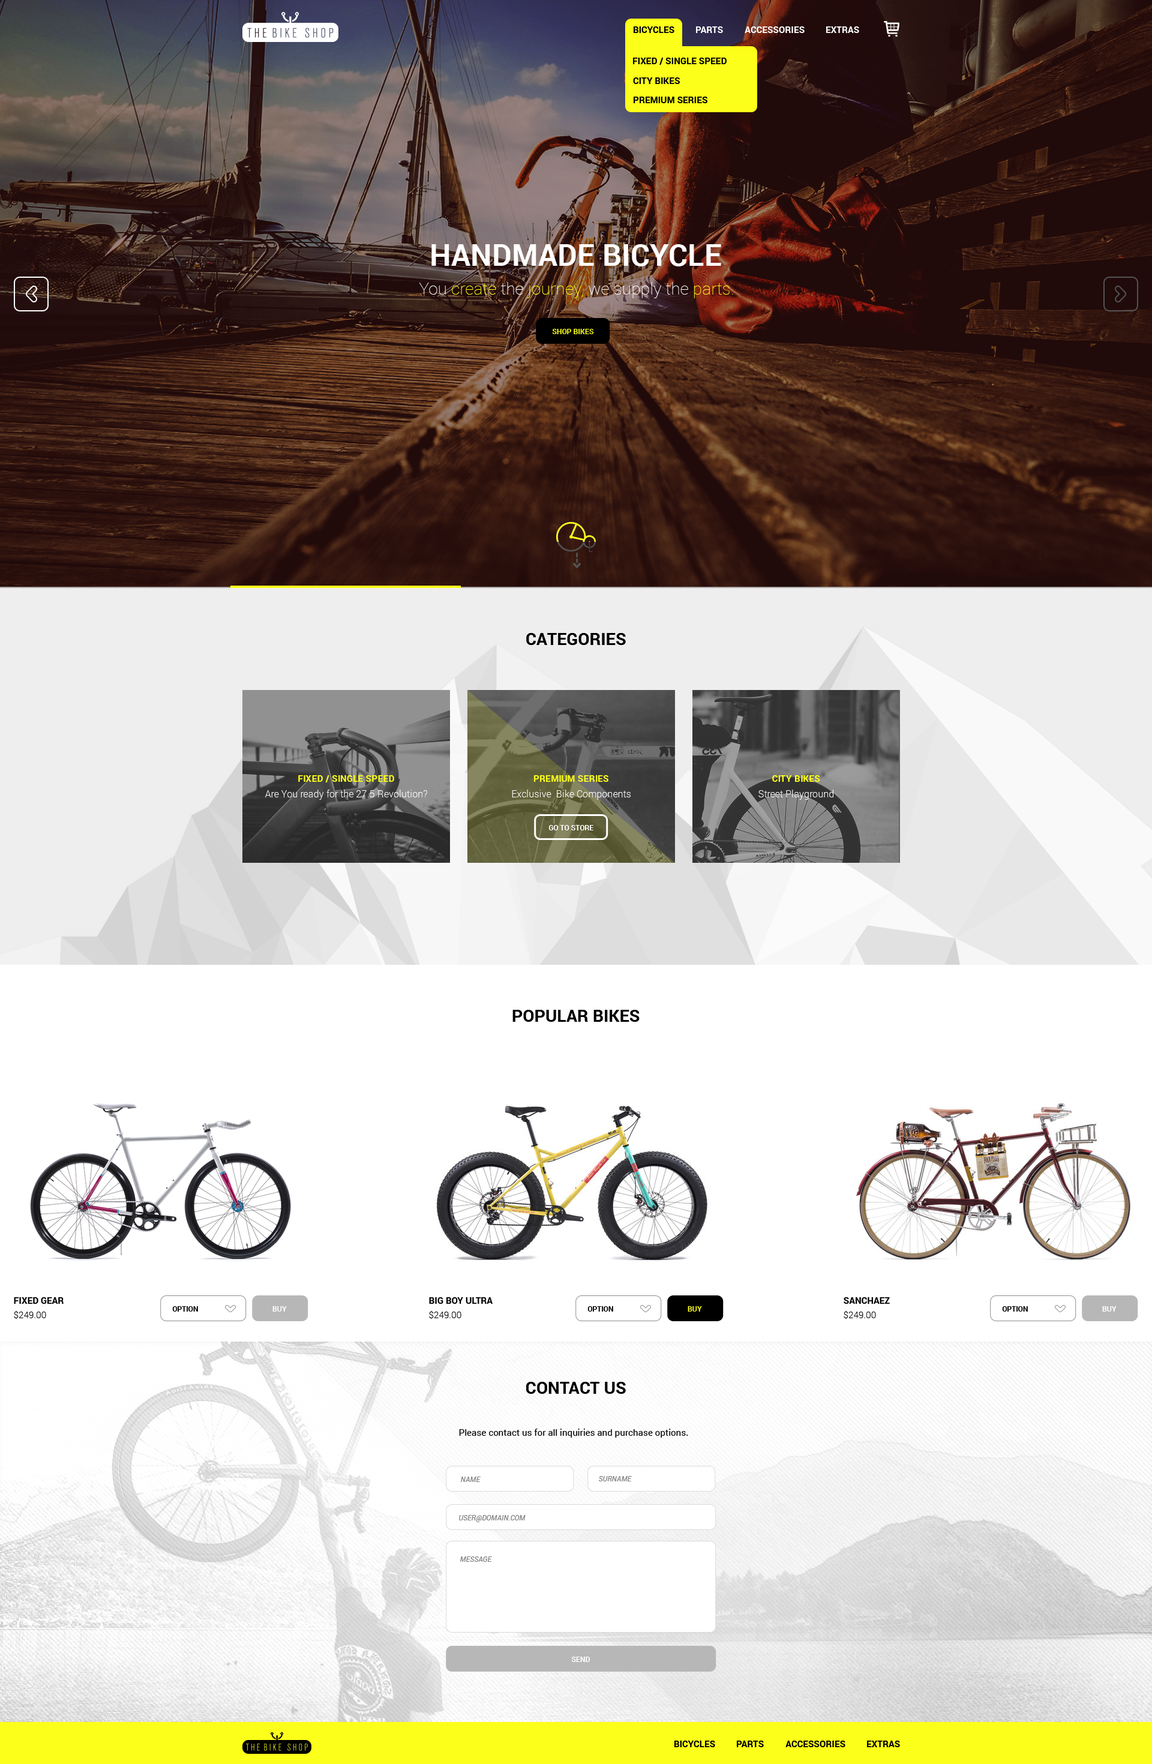
<style>
.page{position:relative;width:1152px;height:1764px;background:#ffffff}
.page>*{position:absolute;margin:0}
.t1{font:9px "Roboto-Bold";letter-spacing:0.005em;color:#000000}
.t2{font:9px "Roboto-Bold";letter-spacing:0.005em;color:#010101}
.t3{font:9px "Roboto-Bold";letter-spacing:0.005em;color:#ffffff}
.t4{font:30px "Roboto-Bold";letter-spacing:0.005em;color:#ffffff}
.t5{font:16.8px "Roboto-Thin";letter-spacing:0.005em;color:#ffffff}
.t6{font:16.8px "Roboto-Thin";letter-spacing:0.005em;color:#fcff19}
.t7{font:7.2px "Roboto-Bold";letter-spacing:0.005em;color:#fcff19}
.t8{font:16.8px "Roboto-Bold";letter-spacing:0.005em;color:#000000}
.t9{font:9px "Roboto-Bold";letter-spacing:0.005em;color:#fcff19}
.t10{font:9.6px "Roboto-Light";letter-spacing:0.005em;color:#ffffff}
.t11{font:7.2px "Roboto-Bold";letter-spacing:0.005em;color:#ffffff}
.t12{font:9px "Roboto-Light";letter-spacing:0.005em;color:#000000}
.t13{font:7.2px "Roboto-Bold";letter-spacing:0.005em;color:#000000}
.t14{font:9px "Roboto-Regular";letter-spacing:0.005em;color:#000000}
.t15{font:7.2px "Roboto-Italic";letter-spacing:0.005em;color:#808080}
</style>
<div class="page">
<p class="t1" style="left:634px;top:26px;width:40px;height:7px">BICYCLES</p>
<p class="t2" style="left:634px;top:26px;width:40px;height:7px">BICYCLES</p>
<p class="t3" style="left:696px;top:26px;width:27px;height:7px">PARTS</p>
<p class="t3" style="left:745px;top:26px;width:60px;height:7px">ACCESSORIES</p>
<p class="t3" style="left:826px;top:26px;width:33px;height:7px">EXTRAS</p>
<p class="t1" style="left:633px;top:58px;width:94px;height:7px">FIXED / SINGLE SPEED</p>
<p class="t1" style="left:633px;top:77px;width:47px;height:7px">CITY BIKES</p>
<p class="t1" style="left:634px;top:97px;width:73px;height:6px">PREMIUM SERIES</p>
<p class="t4" style="left:431px;top:244px;width:290px;height:22px">HANDMADE BICYCLE</p>
<p class="t5" style="left:419px;top:282px;width:314px;height:16px">You<span class="t6"> create </span>the<span class="t6"> journey, </span>we supply the<span class="t6"> parts.</span></p>
<p class="t7" style="left:552px;top:329px;width:42px;height:5px">SHOP BIKES</p>
<p class="t8" style="left:526px;top:633px;width:100px;height:12px">CATEGORIES</p>
<p class="t9" style="left:298px;top:775px;width:96px;height:7px">FIXED / SINGLE SPEED</p>
<p class="t9" style="left:534px;top:775px;width:74px;height:7px">PREMIUM SERIES</p>
<p class="t9" style="left:772px;top:775px;width:48px;height:7px">CITY BIKES</p>
<p class="t10" style="left:265px;top:790px;width:162px;height:10px">Are You ready for the 27.5 Revolution?</p>
<p class="t10" style="left:512px;top:790px;width:119px;height:10px">Exclusive  Bike Components</p>
<p class="t10" style="left:758px;top:790px;width:75px;height:10px">Street Playground</p>
<p class="t11" style="left:548px;top:825px;width:46px;height:5px">GO TO STORE</p>
<p class="t8" style="left:512px;top:1010px;width:128px;height:12px">POPULAR BIKES</p>
<p class="t1" style="left:14px;top:1297px;width:50px;height:7px">FIXED GEAR</p>
<p class="t1" style="left:429px;top:1297px;width:64px;height:7px">BIG BOY ULTRA</p>
<p class="t1" style="left:844px;top:1297px;width:46px;height:7px">SANCHAEZ</p>
<p class="t12" style="left:14px;top:1310px;width:32px;height:9px">$249.00</p>
<p class="t13" style="left:172px;top:1306px;width:26px;height:6px">OPTION</p>
<p class="t11" style="left:272px;top:1306px;width:15px;height:6px">BUY</p>
<p class="t12" style="left:429px;top:1310px;width:32px;height:9px">$249.00</p>
<p class="t13" style="left:587px;top:1306px;width:26px;height:6px">OPTION</p>
<p class="t7" style="left:688px;top:1306px;width:14px;height:6px">BUY</p>
<p class="t12" style="left:844px;top:1310px;width:32px;height:9px">$249.00</p>
<p class="t13" style="left:1002px;top:1306px;width:26px;height:6px">OPTION</p>
<p class="t11" style="left:1102px;top:1306px;width:15px;height:6px">BUY</p>
<p class="t8" style="left:526px;top:1382px;width:100px;height:12px">CONTACT US</p>
<p class="t14" style="left:459px;top:1429px;width:229px;height:9px">Please contact us for all inquiries and purchase options.</p>
<p class="t15" style="left:461px;top:1477px;width:20px;height:5px">NAME</p>
<p class="t15" style="left:599px;top:1476px;width:33px;height:5px">SURNAME</p>
<p class="t15" style="left:459px;top:1515px;width:67px;height:7px">USER@DOMAIN.COM</p>
<p class="t15" style="left:460px;top:1556px;width:32px;height:6px">MESSAGE</p>
<p class="t11" style="left:571px;top:1657px;width:19px;height:5px">SEND</p>
<p class="t2" style="left:674px;top:1741px;width:41px;height:6px">BICYCLES</p>
<p class="t1" style="left:737px;top:1741px;width:27px;height:6px">PARTS</p>
<p class="t1" style="left:785px;top:1741px;width:60px;height:6px">ACCESSORIES</p>
<p class="t1" style="left:867px;top:1741px;width:33px;height:6px">EXTRAS</p>
</div>
